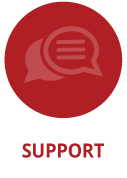
<style>
.page{position:relative;width:127px;height:178px;background:#ffffff}
.page>*{position:absolute;margin:0}
.t1{font:19.6px "OpenSans-Bold";color:#b01f23;scale:0.92 1}
</style>
<div class="page">
<p class="t1" style="left:22px;top:143px;width:82px;height:15px">SUPPORT</p>
</div>
